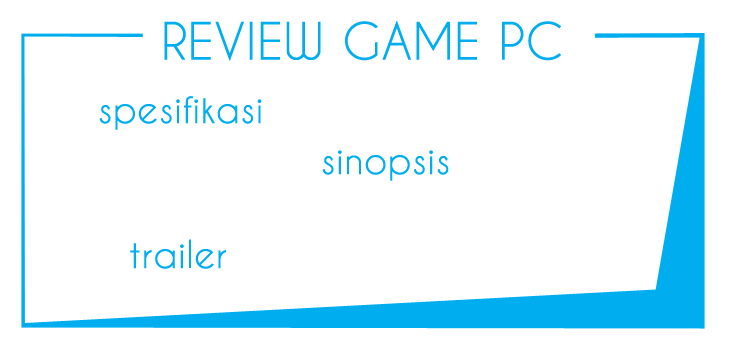
<style>
.page{position:relative;width:729px;height:350px;background:#ffffff}
.page>*{position:absolute;margin:0}
.t1{font:48px "CaviarDreams";color:#00aeef;font-weight:bold}
.t2{font:36px "CaviarDreams";color:#00aeef;font-weight:bold}
</style>
<div class="page">
<p class="t1" style="left:164px;top:21px;width:397px;height:40px">REVIEW GAME PC</p>
<p class="t2" style="left:99px;top:96px;width:163px;height:34px">spesifikasi</p>
<p class="t2" style="left:322px;top:150px;width:127px;height:31px">sinopsis</p>
<p class="t2" style="left:130px;top:239px;width:96px;height:30px">trailer</p>
</div>
